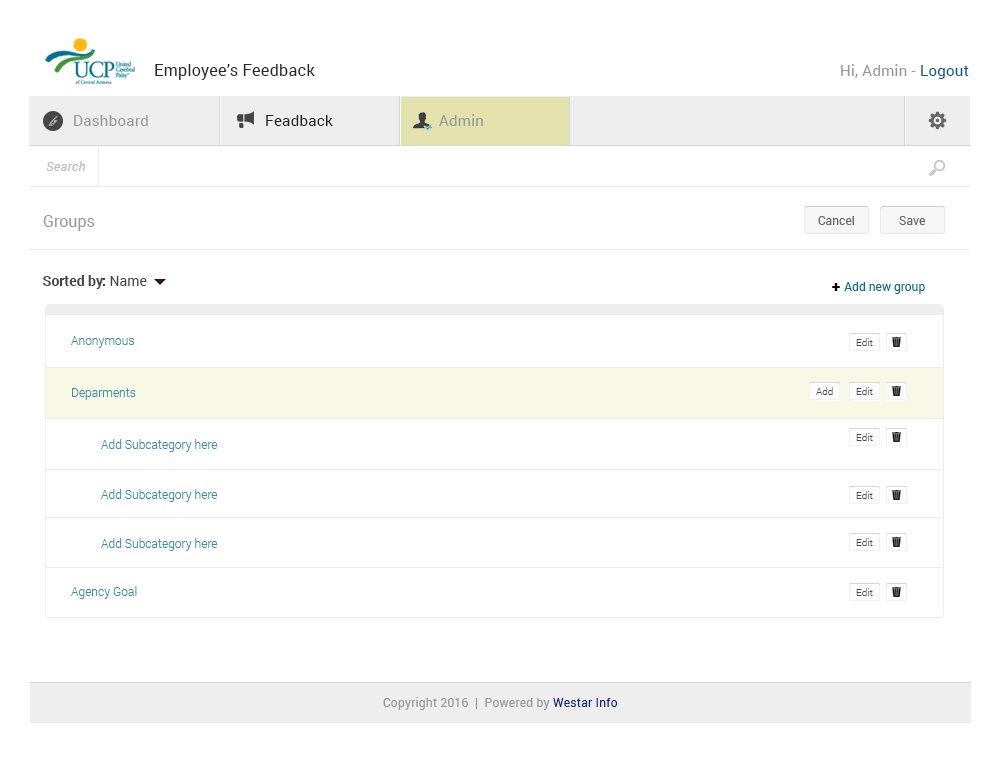
<style>
.page{position:relative;width:1000px;height:761px;background:#ffffff}
.page>*{position:absolute;margin:0}
.t1{font:16px "Roboto-Regular";letter-spacing:0.02em;color:#282828}
.t2{font:15px "Roboto-Regular";letter-spacing:0.02em;color:#989898}
.t3{font:15px "Roboto-Regular";letter-spacing:0.02em;color:#0053a8}
.t4{font:10px "BickhamScriptPro-Regular";letter-spacing:0.02em;color:#bababa}
.t5{font:15px "Roboto-Regular";letter-spacing:0.02em;color:#212121}
.t6{font:13px "Roboto-Italic";letter-spacing:0.02em;color:#bebebe}
.t7{font:16px "Roboto-Regular";color:#989898}
.t8{font:12px "Roboto-Regular";color:#666666}
.t9{font:14px "Roboto-Bold";color:#444444}
.t10{font:14px "Roboto-Regular";color:#444444}
.t11{font:16px "Roboto-Black";color:#000000}
.t12{font:12px "Roboto-Regular";color:#00718f}
.t13{font:12px "Roboto-Light";color:#368fa7}
.t14{font:10px "Roboto-Light";color:#474a4b}
.t15{font:12px "Roboto-Regular";letter-spacing:0.02em;color:#989898}
.t16{font:12px "Roboto-Regular";letter-spacing:0.02em;color:#172788}
</style>
<div class="page">
<p class="t1" style="left:155px;top:64px;width:160px;height:16px">Employee’s Feedback</p>
<p class="t2" style="left:841px;top:64px;width:128px;height:15px">Hi, Admin - <span class="t3">Logout</span></p>
<p class="t4" style="left:48px;top:116px;width:10px;height:10px">fg</p>
<p class="t2" style="left:74px;top:115px;width:74px;height:11px">Dashboard</p>
<p class="t5" style="left:266px;top:115px;width:67px;height:11px">Feadback</p>
<p class="t2" style="left:439px;top:114px;width:44px;height:12px">Admin</p>
<p class="t6" style="left:46px;top:161px;width:40px;height:10px">Search</p>
<p class="t7" style="left:43px;top:215px;width:52px;height:16px">Groups</p>
<p class="t8" style="left:818px;top:216px;width:36px;height:9px">Cancel</p>
<p class="t8" style="left:899px;top:216px;width:26px;height:9px">Save</p>
<p class="t9" style="left:43px;top:275px;width:104px;height:14px">Sorted by:<span class="t10"> Name</span></p>
<p class="t11" style="left:832px;top:283px;width:8px;height:8px">+</p>
<p class="t12" style="left:844px;top:282px;width:81px;height:12px">Add new group</p>
<p class="t13" style="left:71px;top:336px;width:63px;height:12px">Anonymous</p>
<p class="t14" style="left:856px;top:338px;width:17px;height:8px">Edit</p>
<p class="t13" style="left:72px;top:388px;width:64px;height:12px">Deparments</p>
<p class="t14" style="left:816px;top:387px;width:17px;height:8px">Add</p>
<p class="t14" style="left:856px;top:387px;width:17px;height:8px">Edit</p>
<p class="t14" style="left:856px;top:433px;width:17px;height:8px">Edit</p>
<p class="t13" style="left:101px;top:439px;width:117px;height:13px">Add Subcategory here</p>
<p class="t13" style="left:101px;top:489px;width:117px;height:13px">Add Subcategory here</p>
<p class="t14" style="left:856px;top:491px;width:17px;height:8px">Edit</p>
<p class="t13" style="left:101px;top:538px;width:117px;height:13px">Add Subcategory here</p>
<p class="t14" style="left:856px;top:538px;width:17px;height:8px">Edit</p>
<p class="t13" style="left:71px;top:586px;width:66px;height:13px">Agency Goal</p>
<p class="t14" style="left:856px;top:588px;width:17px;height:8px">Edit</p>
<p class="t15" style="left:383px;top:697px;width:235px;height:13px">Copyright 2016  |  Powered by <span class="t16">Westar Info</span></p>
</div>
